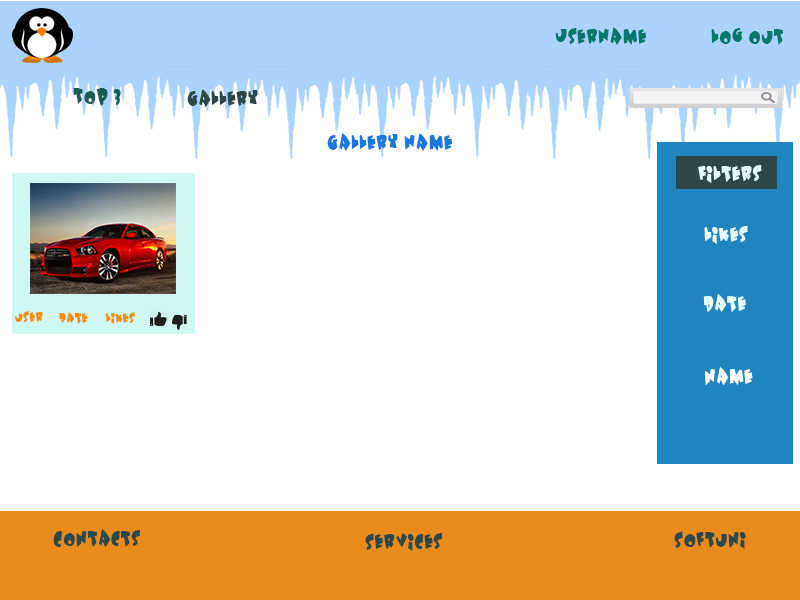
<style>
.page{position:relative;width:800px;height:600px;background:#ffffff}
.page>*{position:absolute;margin:0}
.t1{font:18px "Underattack";color:#08776b}
.t2{font:18px "Underattack";color:#185e57}
.t3{font:18px "Underattack";color:#2e4849}
.t4{font:18px "Underattack";color:#1d78dd}
.t5{font:18px "Underattack";color:#e7feff}
.t6{font:12px "Underattack";color:#f48e09}
.t7{font:18px "Underattack";color:#ffffff}
</style>
<div class="page">
<p class="t1" style="left:555px;top:27px;width:92px;height:18px">UserName</p>
<p class="t1" style="left:711px;top:28px;width:72px;height:17px">log out</p>
<p class="t2" style="left:73px;top:88px;width:48px;height:18px">Top 3</p>
<p class="t3" style="left:187px;top:89px;width:71px;height:18px">Gallery</p>
<p class="t4" style="left:327px;top:133px;width:126px;height:18px">Gallery Name</p>
<p class="t5" style="left:698px;top:165px;width:64px;height:18px">filters</p>
<p class="t5" style="left:704px;top:226px;width:44px;height:18px">likes</p>
<p class="t5" style="left:703px;top:294px;width:43px;height:18px">date</p>
<p class="t6" style="left:15px;top:311px;width:28px;height:11px">user</p>
<p class="t6" style="left:59px;top:312px;width:29px;height:12px">date</p>
<p class="t6" style="left:106px;top:312px;width:29px;height:12px">likes</p>
<p class="t7" style="left:704px;top:367px;width:49px;height:18px">name</p>
<p class="t3" style="left:53px;top:529px;width:88px;height:18px">Contacts</p>
<p class="t3" style="left:365px;top:533px;width:78px;height:18px">Services</p>
<p class="t3" style="left:674px;top:531px;width:72px;height:18px">Softuni</p>
</div>
